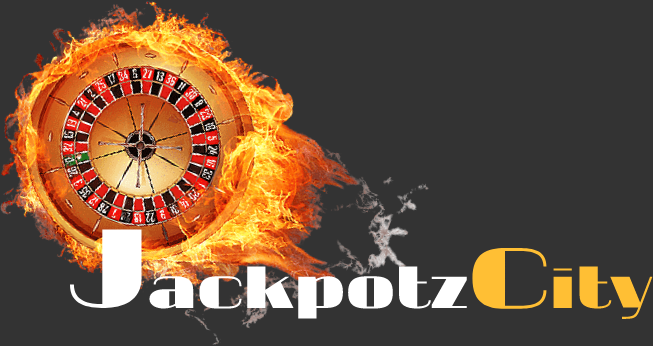
<style>
.page{position:relative;width:653px;height:346px;background:#333333}
.page>*{position:absolute;margin:0}
.t1{font:52px "20db";color:#ffffff}
.t2{font:98px "20db";color:#ffffff}
.t3{font:74px "20db";color:#ffbf34}
.t4{font:52px "20db";color:#ffbf34}
</style>
<div class="page">
<p class="t1" style="left:69px;top:229px;width:584px;height:90px"><span class="t2">J</span>ackpotz<span class="t3">C</span><span class="t4">ity</span></p>
</div>
